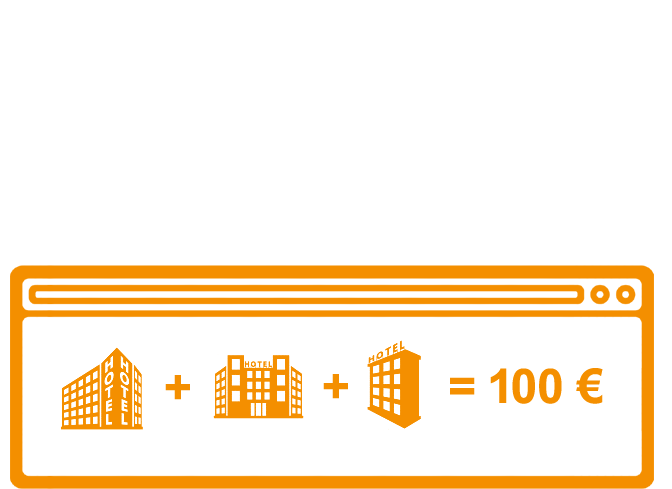
<style>
.page{position:relative;width:672px;height:489px;background:#ffffff}
.page>*{position:absolute;margin:0}
.t1{font:48px "Arial-BoldMT";color:#f48f00}
</style>
<div class="page">
<p class="t1" style="left:165px;top:375px;width:25px;height:25px">+</p>
<p class="t1" style="left:323px;top:374px;width:25px;height:25px">+</p>
<p class="t1" style="left:450px;top:368px;width:153px;height:36px">= 100 €</p>
</div>
